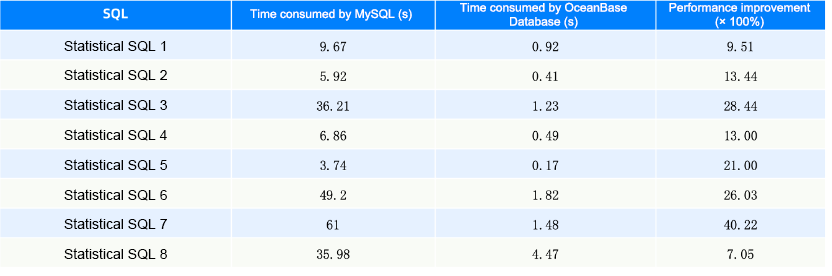
<style>
.page{position:relative;width:832px;height:276px;background:#e6f1ff}
.page>*{position:absolute;margin:0}
.t1{font:12px/14px "ArialMT";color:#ffffff}
.t2{font:12px "ArialMT";color:#ffffff}
.t3{font:14px/29.8px "ArialMT";color:#000000}
</style>
<div class="page">
<p class="t1" style="left:460px;top:2px;width:167px;height:27px;text-align:center">Time consumed by OceanBase Database (s)</p>
<p class="t1" style="left:669px;top:2px;width:142px;height:27px;text-align:center">Performance improvement (× 100%)</p>
<p class="t2" style="left:250px;top:9px;width:162px;height:12px">Time consumed by MySQL (s)</p>
<p class="t3" style="left:64px;top:40px;width:103px;height:220px;text-align:center">Statistical SQL 1<br>Statistical SQL 2<br>Statistical SQL 3<br>Statistical SQL 4<br>Statistical SQL 5<br>Statistical SQL 6<br>Statistical SQL 7<br>Statistical SQL 8</p>
</div>
